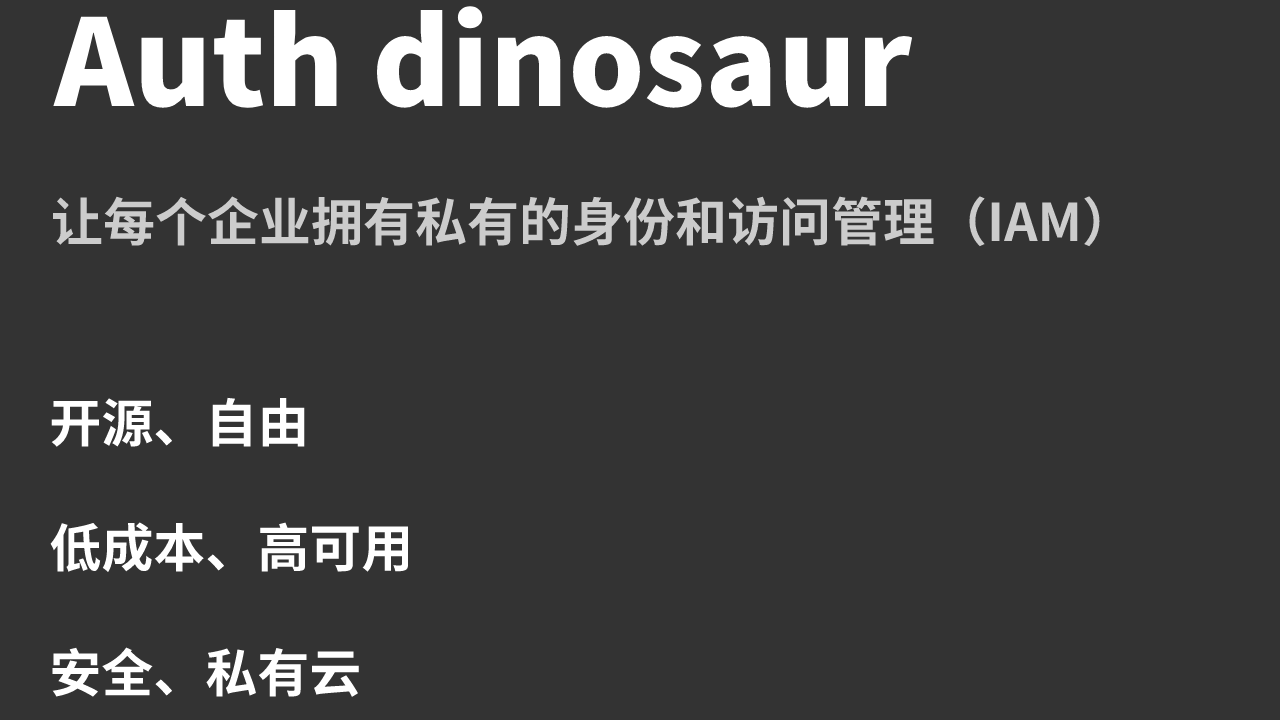
<style>
.page{position:relative;width:1280px;height:720px;background:#333333}
.page>*{position:absolute;margin:0}
.t1{font:120px "SourceHanSansSC-Heavy";color:#ffffff}
.t2{font:52px "SourceHanSansSC-Bold";color:#cccccc}
.t3{font:52px "SourceHanSansSC-Bold";color:#ffffff}
</style>
<div class="page">
<p class="t1" style="left:53px;top:6px;width:860px;height:102px">Auth dinosaur</p>
<p class="t2" style="left:53px;top:196px;width:1047px;height:51px">让每个企业拥有私有的身份和访问管理（IAM）</p>
<p class="t3" style="left:50px;top:397px;width:359px;height:300px">开源、自由<br><br>低成本、高可用<br><br>安全、私有云</p>
</div>
